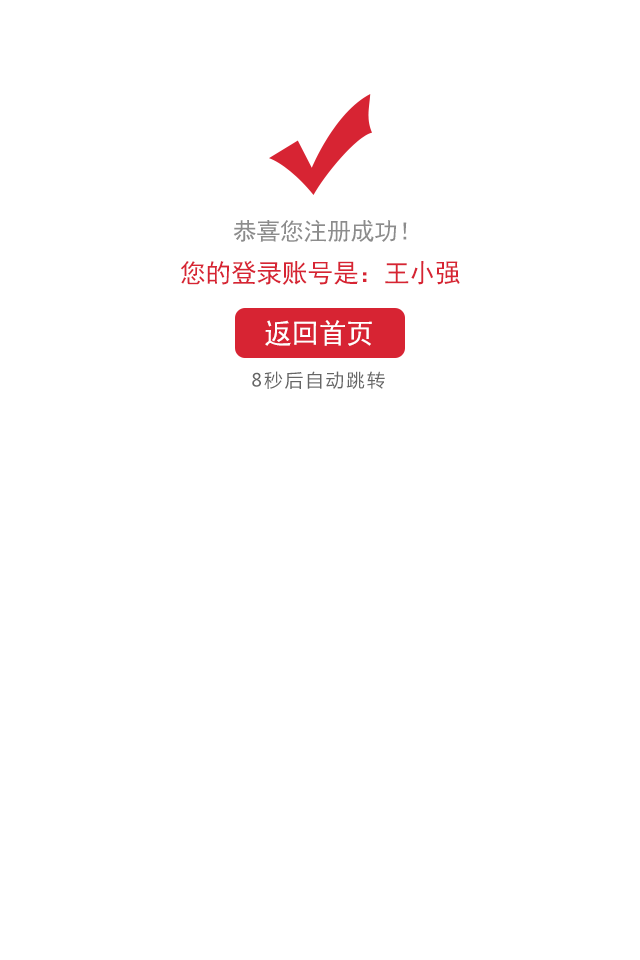
<style>
.page{position:relative;width:640px;height:960px;background:#ffffff}
.page>*{position:absolute;margin:0}
.t1{font:24px "SimHei";letter-spacing:-0.02em;color:#8c8c8c}
.t2{font:26px "SimHei";letter-spacing:-0.02em;color:#d72433}
.t3{font:28px "SimHei";letter-spacing:-0.02em;color:#ffffff}
.t4{font:18px "MicrosoftYaHei";letter-spacing:0.14em;color:#666666}
</style>
<div class="page">
<p class="t1" style="left:233px;top:219px;width:174px;height:23px">恭喜您注册成功！</p>
<p class="t2" style="left:181px;top:260px;width:279px;height:25px">您的登录账号是：王小强</p>
<p class="t3" style="left:265px;top:320px;width:107px;height:26px">返回首页</p>
<p class="t4" style="left:252px;top:371px;width:133px;height:18px">8秒后自动跳转</p>
</div>
